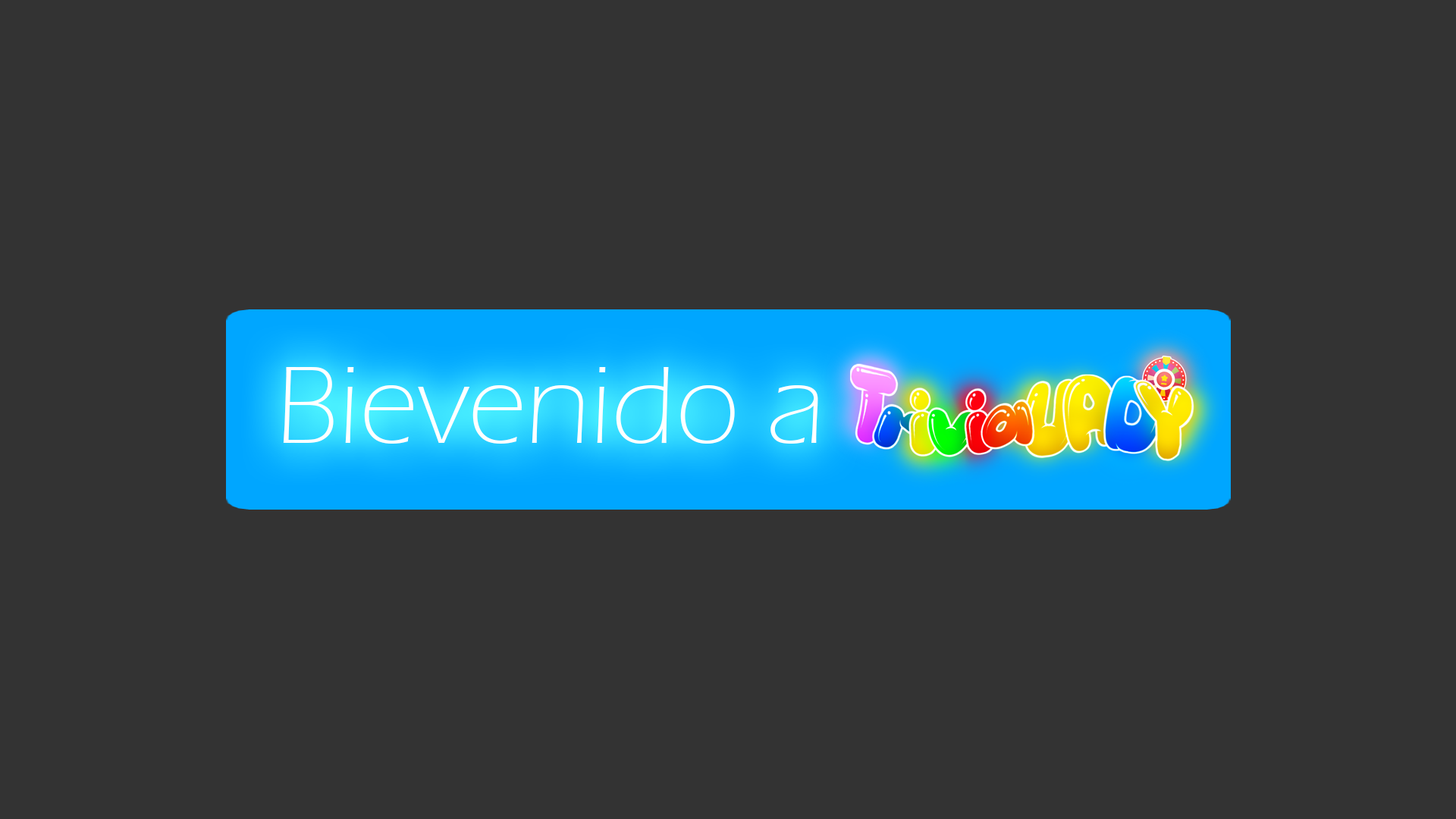
<style>
.page{position:relative;width:1456px;height:819px;background:#333333}
.page>*{position:absolute;margin:0}
.t1{font:113.7px "ErasITC-Light";color:#ffffff}
</style>
<div class="page">
<p class="t1" style="left:283px;top:367px;width:535px;height:77px">Bievenido a</p>
</div>
